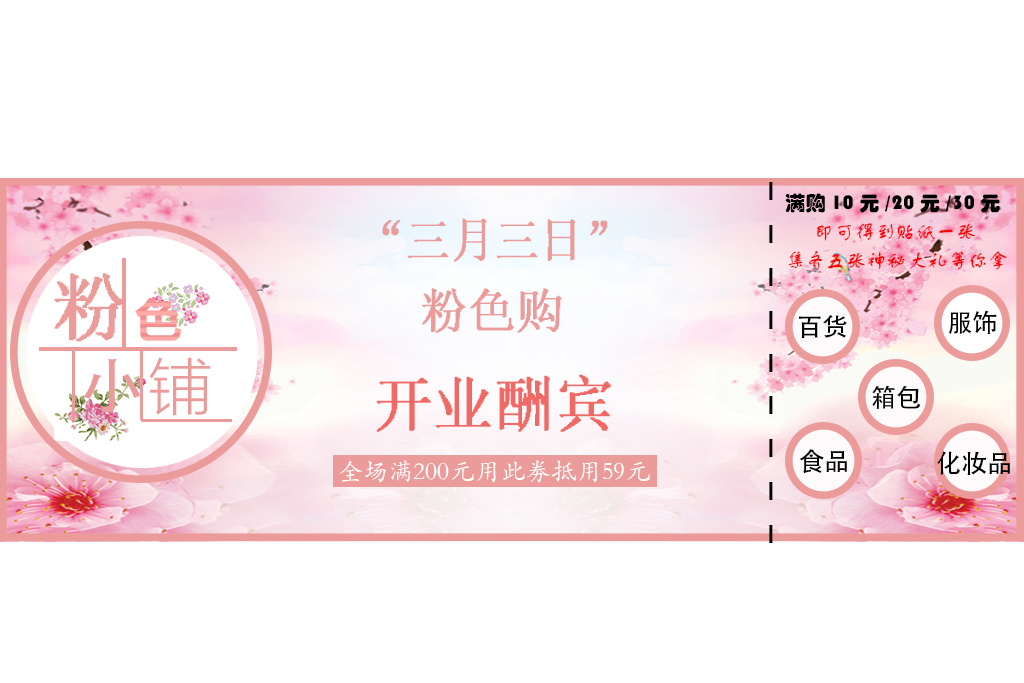
<style>
.page{position:relative;width:1024px;height:683px;background:#ffffff}
.page>*{position:absolute;margin:0}
.t1{font:76.2px "STKaiti";color:#000000}
.t2{font:20.3px "STHupo";color:#000000}
.t3{font:48.7px "System";color:#eb9c9a;scale:0.9 1}
.t4{font:20.3px "FZSTK--GBK1-0";color:#fd0202}
.t5{font:73.9px "System";color:#eb9c9a;scale:1.04 1}
.t6{font:48.4px "System";color:#eb9c9a}
.t7{font:25.4px "AdobeHeitiStd-Regular";color:#000000}
.t8{font:61.6px "AdobeHeitiStd-Regular";color:#eb9c9a;scale:1.04 1}
.t9{font:61.6px "MicrosoftYaHeiUILight";color:#eb9c9a;scale:1.04 1}
.t10{font:61.7px "System";color:#f16965;scale:0.96 1}
.t11{font:25.4px "STKaiti";color:#ffffff}
</style>
<div class="page">
<p class="t1" style="left:769px;top:182px;width:4px;height:361px">- - - - - - - - -</p>
<p class="t2" style="left:785px;top:193px;width:215px;height:20px">满购10元/20元/30元</p>
<p class="t3" style="left:382px;top:218px;width:226px;height:44px">“三月三日”</p>
<p class="t4" style="left:816px;top:223px;width:159px;height:18px">即可得到贴纸一张</p>
<p class="t4" style="left:788px;top:250px;width:219px;height:20px">集齐五张神秘大礼等你拿</p>
<p class="t5" style="left:54px;top:273px;width:72px;height:69px">粉</p>
<p class="t6" style="left:422px;top:288px;width:140px;height:45px">粉色购</p>
<p class="t7" style="left:799px;top:315px;width:48px;height:23px">百货</p>
<p class="t7" style="left:948px;top:310px;width:49px;height:24px">服饰</p>
<p class="t8" style="left:83px;top:359px;width:58px;height:54px">小</p>
<p class="t9" style="left:149px;top:357px;width:62px;height:59px">铺</p>
<p class="t10" style="left:376px;top:374px;width:235px;height:58px">开业酬宾</p>
<p class="t7" style="left:872px;top:385px;width:49px;height:24px">箱包</p>
<p class="t7" style="left:799px;top:449px;width:48px;height:25px">食品</p>
<p class="t11" style="left:339px;top:460px;width:311px;height:23px">全场满200元用此劵抵用59元</p>
<p class="t7" style="left:937px;top:451px;width:73px;height:24px">化妆品</p>
</div>
